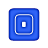
<style>
.page{position:relative;width:48px;height:48px;background:#ffffff}
.page>*{position:absolute;margin:0}
.t1{font:36px "STHupo";color:#2f63f6}
</style>
<div class="page">
<p class="t1" style="left:8px;top:8px;width:32px;height:33px">回</p>
</div>
